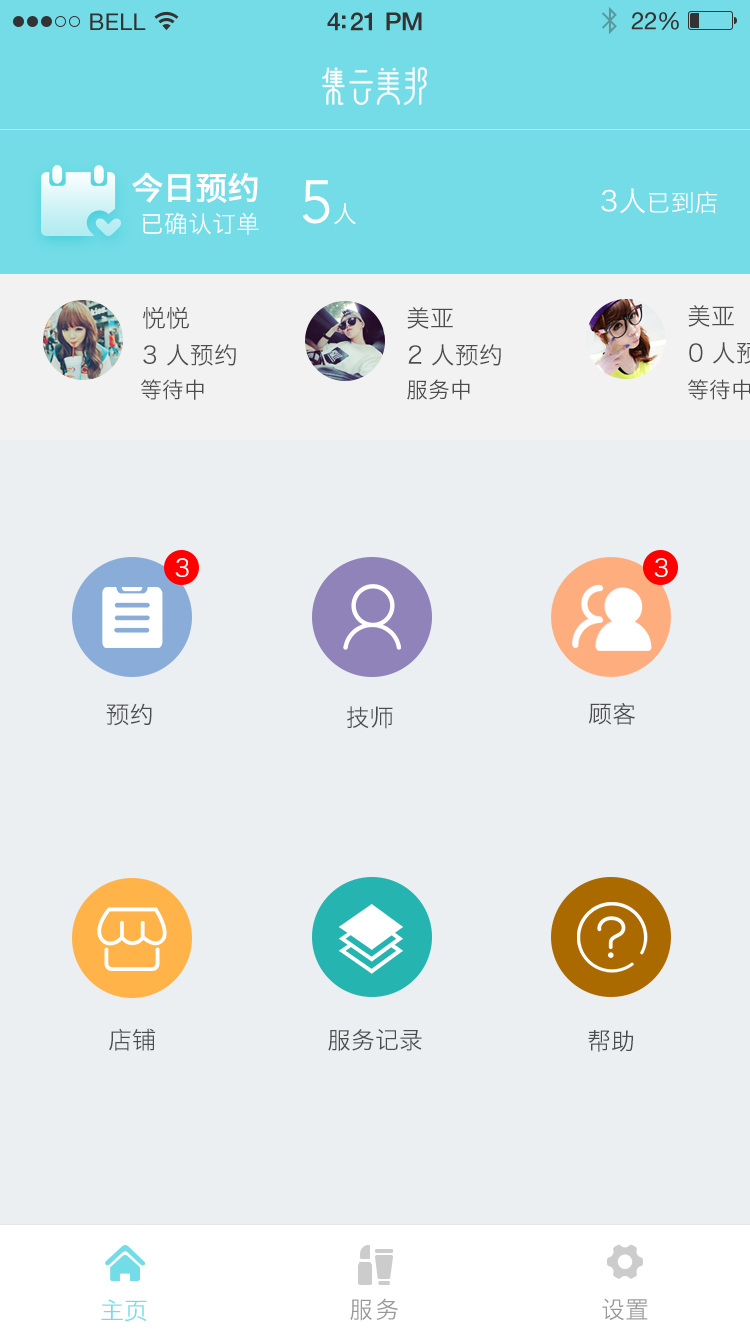
<style>
.page{position:relative;width:750px;height:1334px;background:#ebeff2}
.page>*{position:absolute;margin:0}
.t1{font:32px "HiraginoSansGB-W6";color:#ffffff}
.t2{font:60px "Avenir-Book";color:#ffffff}
.t3{font:24px "HiraginoSansGB-W3";color:#ffffff}
.t4{font:28px "HiraginoSansGB-W3";color:#ffffff}
.t5{font:24px "HiraginoSansGB-W3";color:#4c4c4c}
.t6{font:22px "HiraginoSansGB-W3";color:#4c4c4c}
.t7{font:24px "HiraginoSansGB-W3";color:#73dce6}
.t8{font:24px "HiraginoSansGB-W3";letter-spacing:0.1em;color:#999999}
.t9{font:24px "HiraginoSansGB-W3";color:#999999}
</style>
<div class="page">
<p class="t1" style="left:132px;top:172px;width:126px;height:31px">今日预约</p>
<p class="t2" style="left:302px;top:180px;width:54px;height:45px">5<span class="t3">人</span></p>
<p class="t3" style="left:601px;top:188px;width:117px;height:26px"><span class="t4">3人</span>已到店</p>
<p class="t3" style="left:142px;top:212px;width:117px;height:23px">已确认订单</p>
<p class="t5" style="left:688px;top:305px;width:46px;height:22px">美亚</p>
<p class="t5" style="left:143px;top:307px;width:46px;height:22px">悦悦</p>
<p class="t5" style="left:407px;top:307px;width:46px;height:22px">美亚</p>
<p class="t5" style="left:143px;top:344px;width:93px;height:22px">3 人预约</p>
<p class="t5" style="left:408px;top:344px;width:93px;height:22px">2 人预约</p>
<p class="t6" style="left:141px;top:379px;width:63px;height:21px">等待中</p>
<p class="t6" style="left:407px;top:379px;width:63px;height:21px">服务中</p>
<p class="t6" style="left:688px;top:379px;width:63px;height:21px">等待中</p>
<p class="t3" style="left:175px;top:558px;width:14px;height:19px">3</p>
<p class="t3" style="left:654px;top:558px;width:14px;height:19px">3</p>
<p class="t5" style="left:588px;top:702px;width:47px;height:23px">顾客</p>
<p class="t5" style="left:106px;top:703px;width:46px;height:23px">预约</p>
<p class="t5" style="left:347px;top:706px;width:46px;height:23px">技师</p>
<p class="t5" style="left:109px;top:1028px;width:47px;height:23px">店铺</p>
<p class="t5" style="left:328px;top:1029px;width:94px;height:22px">服务记录</p>
<p class="t5" style="left:588px;top:1030px;width:46px;height:22px">帮助</p>
<p class="t7" style="left:101px;top:1299px;width:46px;height:23px">主页</p>
<p class="t8" style="left:350px;top:1298px;width:48px;height:23px">服务</p>
<p class="t9" style="left:602px;top:1298px;width:46px;height:23px">设置</p>
</div>
